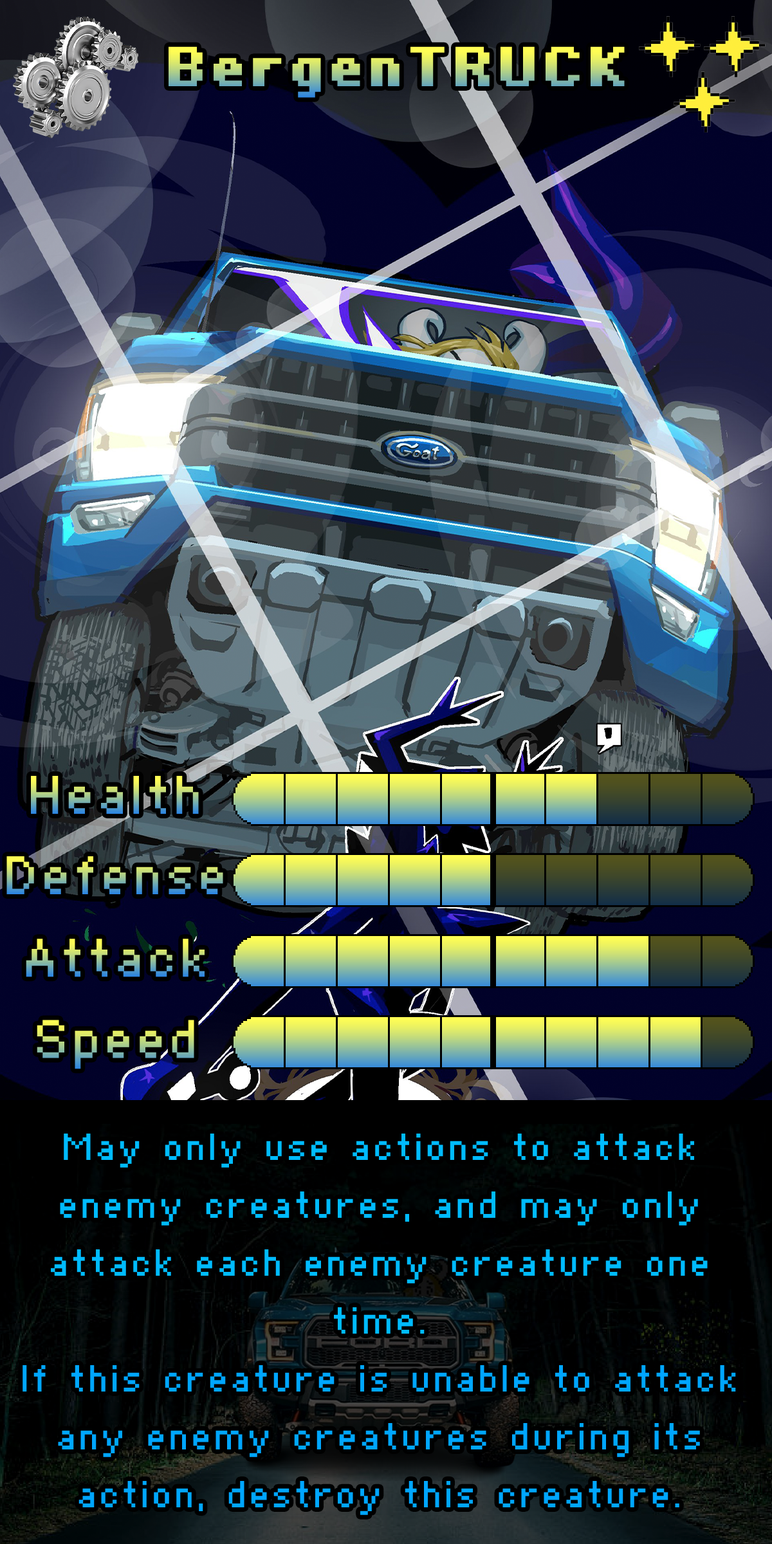
<style>
.page{position:relative;width:772px;height:1544px}
.page>*{position:absolute;margin:0}
.t1{font:96.5px "Supertext01Bold"}
.t2{font:92.7px "Supertext01"}
.t3{font:64.3px/57.9px "Supertext01";color:#00a6ff}
.t4{font:64.3px/57.9px "Supertext01";color:#00bbff}
</style>
<div class="page">
<p class="t1" style="left:169px;top:46px;width:456px;height:52px">BergenTRUCK</p>
<p class="t2" style="left:31px;top:776px;width:168px;height:38px">Health</p>
<p class="t2" style="left:6px;top:856px;width:217px;height:38px">Defense</p>
<p class="t2" style="left:26px;top:939px;width:179px;height:38px">Attack</p>
<p class="t2" style="left:37px;top:1020px;width:157px;height:49px">Speed</p>
<p class="t3" style="left:23px;top:1134px;width:713px;height:381px;text-align:center"><span class="t4">May only use actions to attack enemy creatures, and may only attack each enemy creature one time.<br></span>If this creature is unable to attack any enemy creatures during its action, destroy this creature.</p>
</div>
